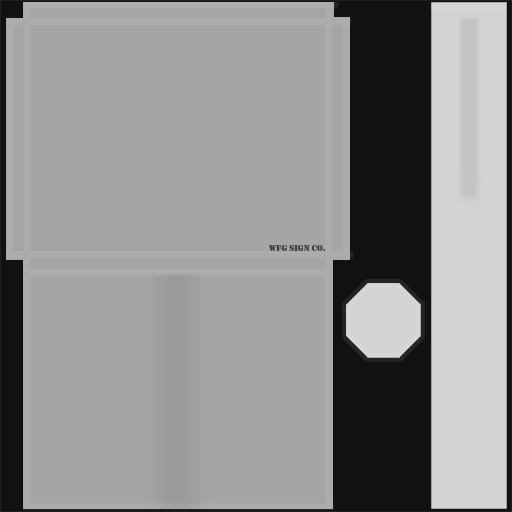
<style>
.page{position:relative;width:512px;height:512px;background:#a5a5a5}
.page>*{position:absolute;margin:0}
.t1{font:9px "Stencil";color:#414141}
</style>
<div class="page">
<p class="t1" style="left:269px;top:244px;width:57px;height:8px">WFG Sign Co.</p>
</div>
